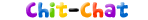
<style>
.page{position:relative;width:148px;height:20px;background:#ffffff}
.page>*{position:absolute;margin:0}
.t1{font:20.8px "Cookies"}
</style>
<div class="page">
<p class="t1" style="left:26px;top:2px;width:102px;height:16px">Chit-Chat</p>
</div>
